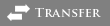
<style>
.page{position:relative;width:110px;height:26px;background:#808080}
.page>*{position:absolute;margin:0}
.t1{font:12px "TrajanPro-Bold";color:#ffffff;scale:1.05 1}
</style>
<div class="page">
<p class="t1" style="left:35px;top:8px;width:66px;height:9px">Transfer</p>
</div>
